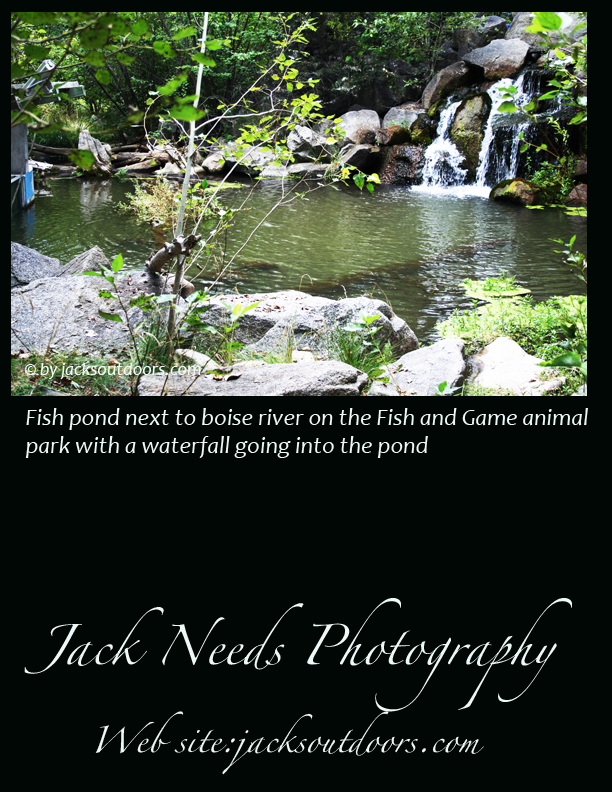
<style>
.page{position:relative;width:612px;height:792px;background:#000705}
.page>*{position:absolute;margin:0}
.t1{font:18px "Candara-Italic";color:#eef8f6}
.t2{font:24px "Candara-Italic";color:#eef8f6}
.t3{font:36px "Zapfino";color:#eef8f6}
.t4{font:24px "Zapfino";color:#eef8f6}
</style>
<div class="page">
<p class="t1" style="left:25px;top:363px;width:176px;height:16px">© by jacksoutdoors.com</p>
<p class="t2" style="left:25px;top:408px;width:563px;height:50px">Fish pond next to boise river on the Fish and Game animal <br>park with a waterfall going into the pond</p>
<p class="t3" style="left:24px;top:598px;width:548px;height:114px">Jack Needs Photography</p>
<p class="t4" style="left:95px;top:711px;width:389px;height:64px">Web site:jacksoutdoors.com</p>
</div>
